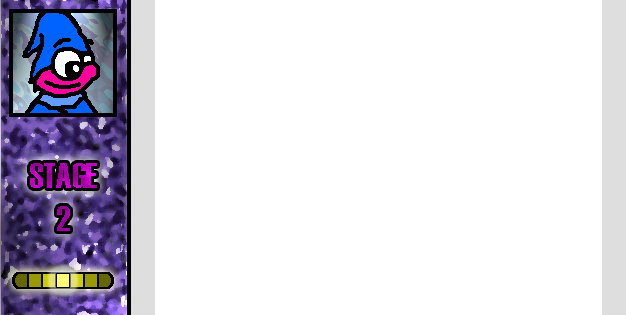
<style>
.page{position:relative;width:626px;height:315px;background:#ffffff}
.page>*{position:absolute;margin:0}
.t1{font:36px "Haettenschweiler"}
</style>
<div class="page">
<p class="t1" style="left:30px;top:163px;width:67px;height:68px;text-align:center">STAGE<br>2</p>
</div>
